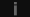
<style>
.page{position:relative;width:30px;height:17px;background:#0e0e0e}
.page>*{position:absolute;margin:0}
.t1{font:18px "DIN-Bold";letter-spacing:0.38em;color:#646464;font-weight:bold}
</style>
<div class="page">
<p class="t1" style="left:14px;top:2px;width:3px;height:14px">i</p>
</div>
